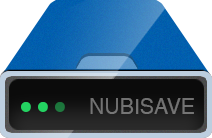
<style>
.page{position:relative;width:212px;height:138px}
.page>*{position:absolute;margin:0}
.t1{font:20.9px "Helvetica";color:#737373;text-transform:uppercase}
</style>
<div class="page">
<p class="t1" style="left:90px;top:98px;width:104px;height:16px">Nubisave</p>
</div>
